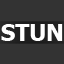
<style>
.page{position:relative;width:64px;height:64px;background:#333333}
.page>*{position:absolute;margin:0}
.t1{font:22.7px "Tahoma-Bold";color:#ffffff}
</style>
<div class="page">
<p class="t1" style="left:1px;top:24px;width:62px;height:17px">STUN</p>
</div>
